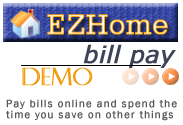
<style>
.page{position:relative;width:183px;height:125px;background:#ffffff}
.page>*{position:absolute;margin:0}
.t1{font:30px "SerifaBT-Roman";font-weight:bold}
.t2{font:24px "Verdana-Italic";color:#3f4358;font-weight:bold}
.t3{font:24px "Socrates";color:#f29b0c;font-weight:bold}
.t4{font:11px/11px "FranklinGothic-Book";letter-spacing:0.075em;color:#595959;font-weight:bold}
</style>
<div class="page">
<p class="t1" style="left:47px;top:14px;width:121px;height:21px">EZHome</p>
<p class="t2" style="left:83px;top:44px;width:93px;height:24px">bill pay</p>
<p class="t3" style="left:22px;top:67px;width:71px;height:19px">DEMO</p>
<p class="t4" style="left:6px;top:99px;width:171px;height:22px">Pay bills online and spend the<br>time you save on other things</p>
</div>
